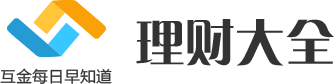
<style>
.page{position:relative;width:335px;height:84px;background:#ffffff}
.page>*{position:absolute;margin:0}
.t1{font:50px "FZCQJW--GB1-0";color:#333333}
.t2{font:16px "FZLTHK--GBK1-0";color:#333333}
</style>
<div class="page">
<p class="t1" style="left:136px;top:19px;width:198px;height:47px">理财大全</p>
<p class="t2" style="left:0px;top:68px;width:112px;height:16px">互金每日早知道</p>
</div>
